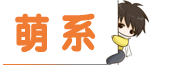
<style>
.page{position:relative;width:170px;height:65px;background:#ffffff}
.page>*{position:absolute;margin:0}
.t1{font:40px "FZY4JW--GB1-0";letter-spacing:0.28em;color:#ef7c32;font-weight:bold;scale:0.89 1}
</style>
<div class="page">
<p class="t1" style="left:15px;top:13px;width:81px;height:39px">萌系</p>
</div>
